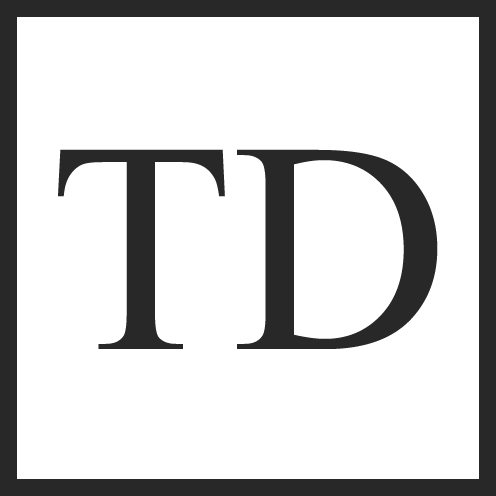
<style>
.page{position:relative;width:496px;height:496px;background:#ffffff}
.page>*{position:absolute;margin:0}
.t1{font:300px "TimesNewRomanPSMT";color:#282828}
</style>
<div class="page">
<p class="t1" style="left:58px;top:149px;width:380px;height:200px">TD</p>
</div>
